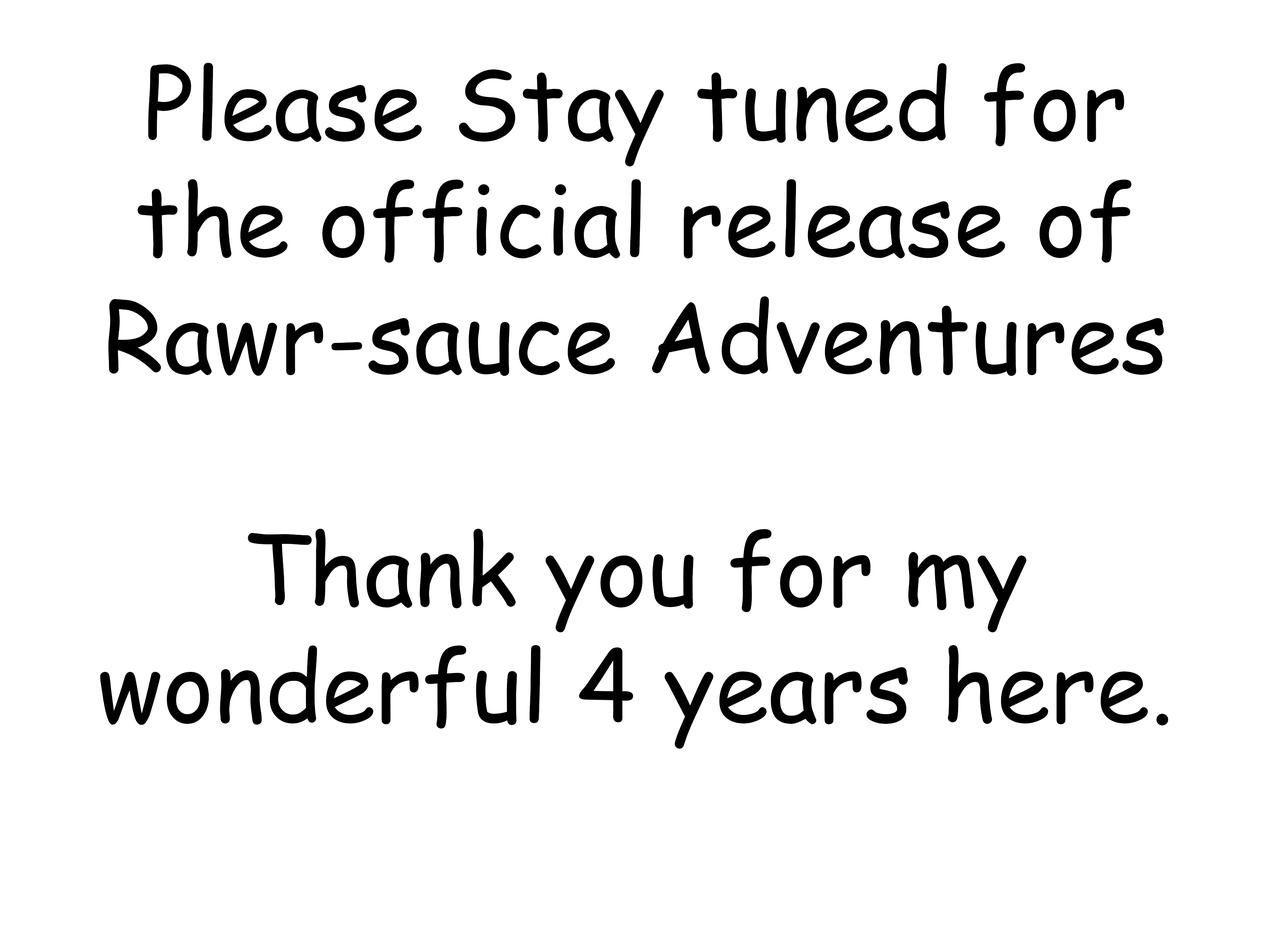
<style>
.page{position:relative;width:1280px;height:931px;background:#ffffff}
.page>*{position:absolute;margin:0}
.t1{font:97px "ComicSansMS";color:#000000}
</style>
<div class="page">
<p class="t1" style="left:100px;top:62px;width:1069px;height:687px;text-align:center">Please Stay tuned for the official release of Rawr-sauce Adventures<br><br>Thank you for my wonderful 4 years here.</p>
</div>
